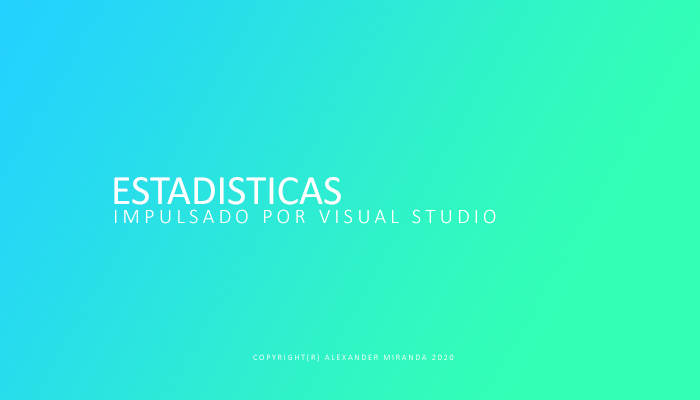
<style>
.page{position:relative;width:700px;height:400px}
.page>*{position:absolute;margin:0}
.t1{font:41.7px "Calibri";color:#ffffff}
.t2{font:20.8px "Calibri-Light";letter-spacing:0.2em;color:#ffffff}
.t3{font:8.3px "Calibri-Light";letter-spacing:0.2em;color:#ffffff}
</style>
<div class="page">
<p class="t1" style="left:114px;top:177px;width:227px;height:28px">ESTADISTICAS</p>
<p class="t2" style="left:115px;top:209px;width:381px;height:15px">IMPULSADO POR VISUAL STUDIO</p>
<p class="t3" style="left:253px;top:354px;width:201px;height:8px">COPYRIGHT(R) ALEXANDER MIRANDA 2020</p>
</div>
